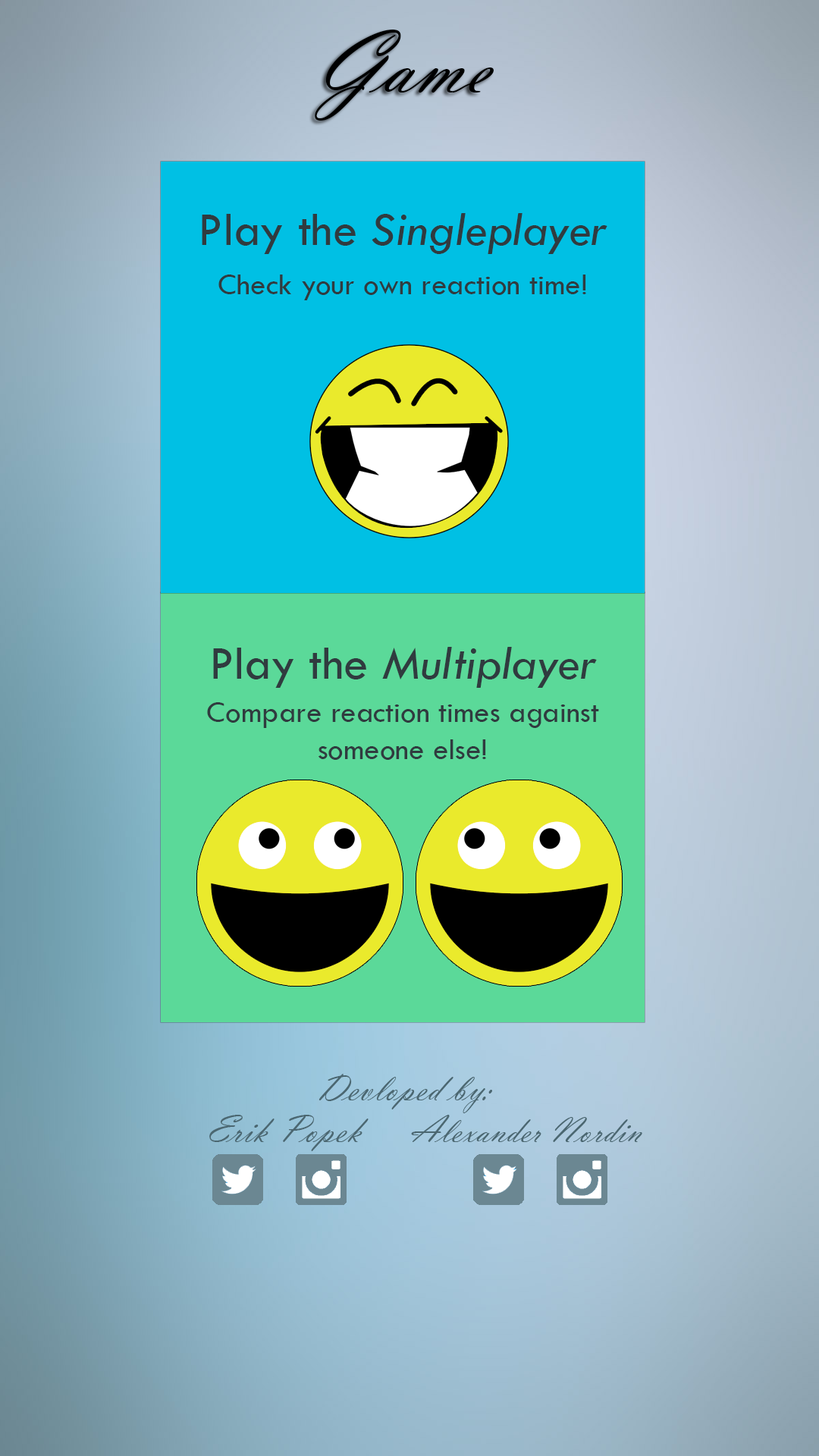
<style>
.page{position:relative;width:819px;height:1456px}
.page>*{position:absolute;margin:0}
.t1{font:91px "VladimirScript";color:#000000}
.t2{font:49.3px "TwCenMT-Italic";color:#303b3f}
.t3{font:49.3px "TwCenMT-Regular";color:#303b3f}
.t4{font:31.1px "TwCenMT-Regular";color:#303b3f}
.t5{font:40.2px "VladimirScript";color:#4b6771}
.t6{font:37.9px "VladimirScript";color:#4b6771}
</style>
<div class="page">
<p class="t1" style="left:315px;top:30px;width:179px;height:91px">Game</p>
<p class="t2" style="left:202px;top:213px;width:405px;height:41px"><span class="t3">Play the </span>Singleplayer</p>
<p class="t4" style="left:218px;top:275px;width:368px;height:25px">Check your own reaction time!</p>
<p class="t2" style="left:213px;top:647px;width:384px;height:41px"><span class="t3">Play the </span>Multiplayer</p>
<p class="t4" style="left:207px;top:702px;width:392px;height:58px;text-align:center">Compare reaction times against <br>someone else!</p>
<p class="t5" style="left:318px;top:1074px;width:174px;height:39px">Devloped by:</p>
<p class="t5" style="left:209px;top:1115px;width:160px;height:36px">Erik Popek</p>
<p class="t6" style="left:411px;top:1115px;width:231px;height:27px">Alexander Nordin</p>
</div>
